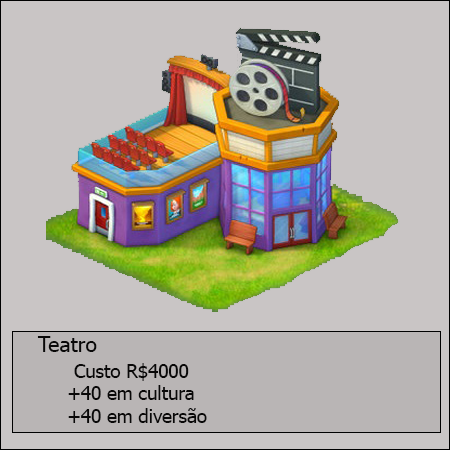
<style>
.page{position:relative;width:450px;height:450px;background:#c9c5c5}
.page>*{position:absolute;margin:0}
.t1{font:18.7px "Tahoma";color:#090808}
.t2{font:21.3px "Tahoma";color:#090808}
</style>
<div class="page">
<p class="t1" style="left:37px;top:336px;width:170px;height:87px"><span class="t2">Teatro<br> </span>Custo R$4000<br>     +40 em cultura  <br>     +40 em diversão</p>
</div>
